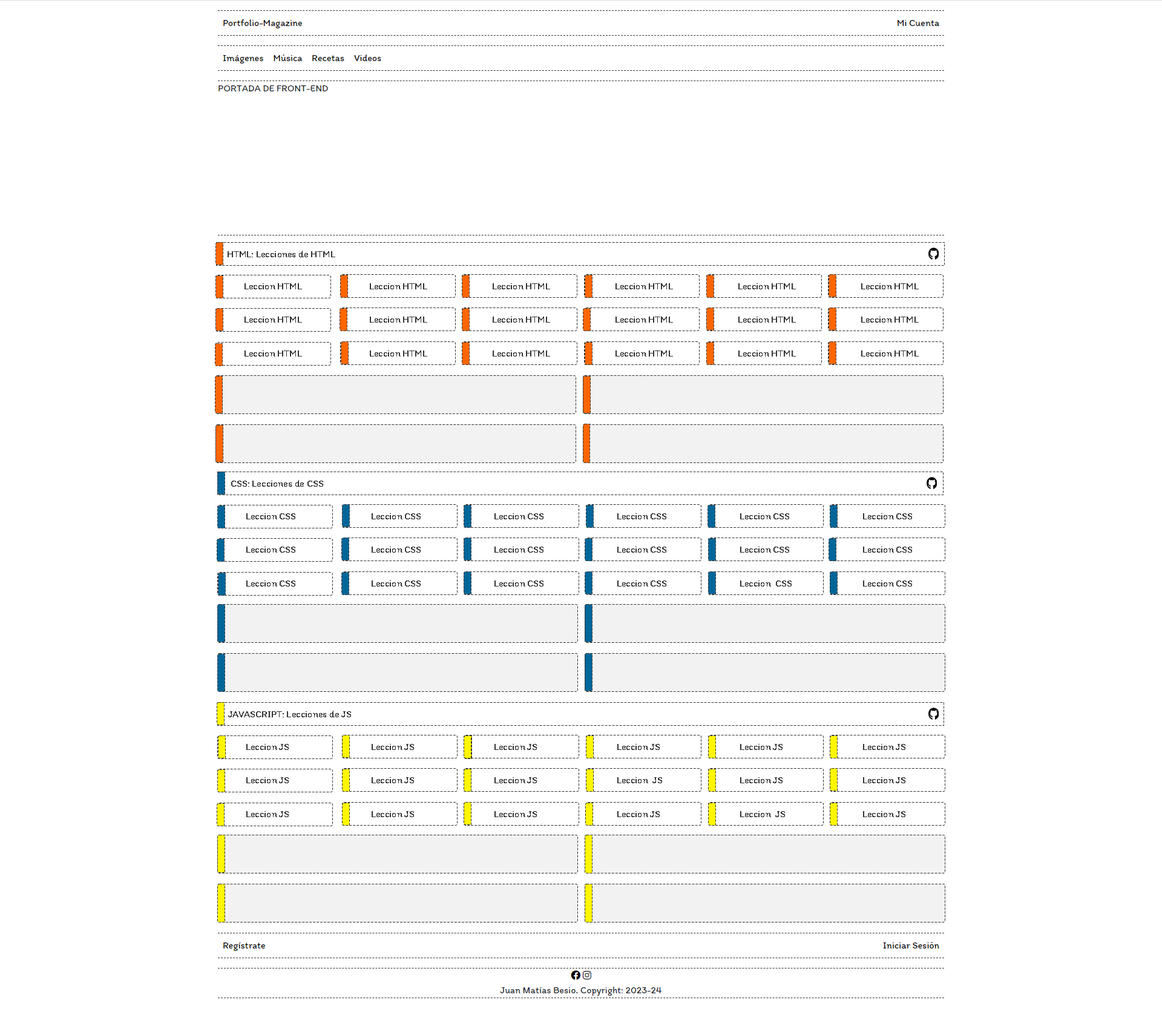
<style>
.page{position:relative;width:1162px;height:1026px;background:#ffffff}
.page>*{position:absolute;margin:0}
.t1{font:9.7px "Itim-Regular";color:#333333}
</style>
<div class="page">
<p class="t1" style="left:228px;top:251px;width:107px;height:6px">HTML: Lecciones de HTML</p>
<p class="t1" style="left:245px;top:283px;width:57px;height:6px">Leccion HTML</p>
<p class="t1" style="left:370px;top:283px;width:57px;height:6px">Leccion HTML</p>
<p class="t1" style="left:493px;top:283px;width:57px;height:6px">Leccion HTML</p>
<p class="t1" style="left:616px;top:283px;width:57px;height:6px">Leccion HTML</p>
<p class="t1" style="left:738px;top:283px;width:58px;height:6px">Leccion HTML</p>
<p class="t1" style="left:861px;top:283px;width:58px;height:6px">Leccion HTML</p>
<p class="t1" style="left:245px;top:317px;width:57px;height:6px">Leccion HTML</p>
<p class="t1" style="left:370px;top:317px;width:57px;height:6px">Leccion HTML</p>
<p class="t1" style="left:493px;top:317px;width:57px;height:6px">Leccion HTML</p>
<p class="t1" style="left:616px;top:317px;width:57px;height:6px">Leccion HTML</p>
<p class="t1" style="left:738px;top:317px;width:58px;height:6px">Leccion HTML</p>
<p class="t1" style="left:861px;top:317px;width:58px;height:6px">Leccion HTML</p>
<p class="t1" style="left:245px;top:350px;width:57px;height:7px">Leccion HTML</p>
<p class="t1" style="left:370px;top:350px;width:57px;height:7px">Leccion HTML</p>
<p class="t1" style="left:493px;top:350px;width:57px;height:7px">Leccion HTML</p>
<p class="t1" style="left:616px;top:350px;width:57px;height:7px">Leccion HTML</p>
<p class="t1" style="left:738px;top:350px;width:58px;height:7px">Leccion HTML</p>
<p class="t1" style="left:861px;top:350px;width:58px;height:7px">Leccion HTML</p>
<p class="t1" style="left:231px;top:480px;width:92px;height:7px">CSS: Lecciones de CSS</p>
<p class="t1" style="left:246px;top:513px;width:49px;height:6px">Leccion CSS</p>
<p class="t1" style="left:372px;top:513px;width:49px;height:6px">Leccion CSS</p>
<p class="t1" style="left:495px;top:513px;width:49px;height:6px">Leccion CSS</p>
<p class="t1" style="left:617px;top:513px;width:49px;height:6px">Leccion CSS</p>
<p class="t1" style="left:740px;top:513px;width:49px;height:6px">Leccion CSS</p>
<p class="t1" style="left:863px;top:513px;width:49px;height:6px">Leccion CSS</p>
<p class="t1" style="left:246px;top:547px;width:49px;height:6px">Leccion CSS</p>
<p class="t1" style="left:372px;top:547px;width:49px;height:6px">Leccion CSS</p>
<p class="t1" style="left:495px;top:547px;width:49px;height:6px">Leccion CSS</p>
<p class="t1" style="left:617px;top:547px;width:49px;height:6px">Leccion CSS</p>
<p class="t1" style="left:740px;top:547px;width:49px;height:6px">Leccion CSS</p>
<p class="t1" style="left:863px;top:547px;width:49px;height:6px">Leccion CSS</p>
<p class="t1" style="left:246px;top:580px;width:49px;height:7px">Leccion CSS</p>
<p class="t1" style="left:372px;top:580px;width:49px;height:7px">Leccion CSS</p>
<p class="t1" style="left:495px;top:580px;width:49px;height:7px">Leccion CSS</p>
<p class="t1" style="left:617px;top:580px;width:49px;height:7px">Leccion CSS</p>
<p class="t1" style="left:740px;top:580px;width:52px;height:7px">Leccion  CSS</p>
<p class="t1" style="left:863px;top:580px;width:49px;height:7px">Leccion CSS</p>
<p class="t1" style="left:228px;top:711px;width:123px;height:6px">JAVASCRIPT: Lecciones de JS</p>
<p class="t1" style="left:246px;top:744px;width:43px;height:6px">Leccion JS</p>
<p class="t1" style="left:372px;top:744px;width:42px;height:6px">Leccion JS</p>
<p class="t1" style="left:495px;top:744px;width:42px;height:6px">Leccion JS</p>
<p class="t1" style="left:617px;top:744px;width:43px;height:6px">Leccion JS</p>
<p class="t1" style="left:740px;top:744px;width:43px;height:6px">Leccion JS</p>
<p class="t1" style="left:863px;top:744px;width:43px;height:6px">Leccion JS</p>
<p class="t1" style="left:246px;top:777px;width:43px;height:6px">Leccion JS</p>
<p class="t1" style="left:372px;top:777px;width:42px;height:6px">Leccion JS</p>
<p class="t1" style="left:495px;top:777px;width:42px;height:6px">Leccion JS</p>
<p class="t1" style="left:617px;top:777px;width:45px;height:6px">Leccion  JS</p>
<p class="t1" style="left:740px;top:777px;width:43px;height:6px">Leccion JS</p>
<p class="t1" style="left:863px;top:777px;width:43px;height:6px">Leccion JS</p>
<p class="t1" style="left:246px;top:811px;width:43px;height:6px">Leccion JS</p>
<p class="t1" style="left:372px;top:811px;width:42px;height:6px">Leccion JS</p>
<p class="t1" style="left:495px;top:811px;width:42px;height:6px">Leccion JS</p>
<p class="t1" style="left:617px;top:811px;width:43px;height:6px">Leccion JS</p>
<p class="t1" style="left:740px;top:811px;width:45px;height:6px">Leccion  JS</p>
<p class="t1" style="left:863px;top:811px;width:43px;height:6px">Leccion JS</p>
</div>
